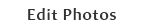
<style>
.page{position:relative;width:144px;height:28px;background:#ffffff}
.page>*{position:absolute;margin:0}
.t1{font:16px "AmiraParadiso";letter-spacing:0.05em;color:#333333}
</style>
<div class="page">
<p class="t1" style="left:28px;top:8px;width:88px;height:12px">Edit Photos</p>
</div>
